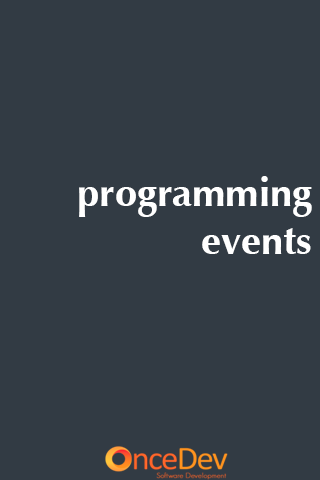
<style>
.page{position:relative;width:320px;height:480px;background:#323b44}
.page>*{position:absolute;margin:0}
.t1{font:40px "Optima-Bold";color:#ffffff}
</style>
<div class="page">
<p class="t1" style="left:79px;top:176px;width:233px;height:78px;text-align:right">programming events</p>
</div>
